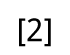
<style>
.page{position:relative;width:70px;height:55px;background:#ffffff}
.page>*{position:absolute;margin:0}
.t1{font:31.8px "DroidSans";color:#000000}
</style>
<div class="page">
<p class="t1" style="left:19px;top:18px;width:32px;height:29px">[2]</p>
</div>
